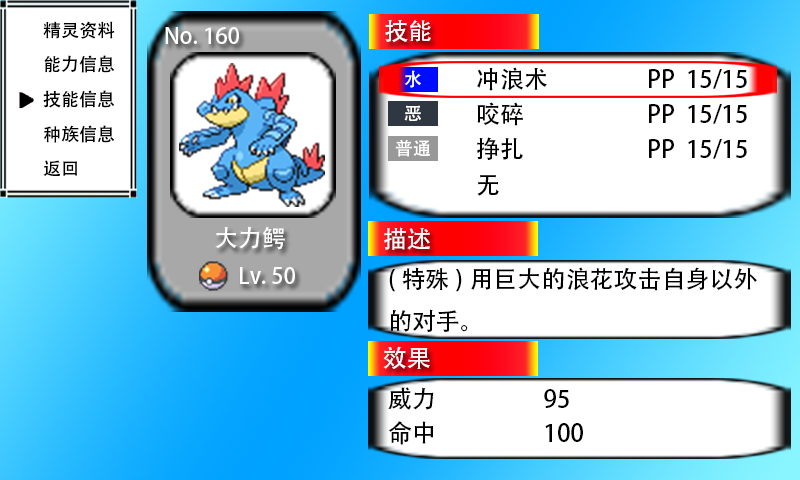
<style>
.page{position:relative;width:800px;height:480px;background:#ffffff}
.page>*{position:absolute;margin:0}
.t1{font:18px "AdobeHeitiStd-Regular";color:#000000}
.t2{font:22px "AdobeHeitiStd-Regular";color:#fffefe}
.t3{font:24px "AdobeHeitiStd-Regular";color:#fffefe}
.t4{font:24px "AdobeHeitiStd-Regular";color:#000000}
</style>
<div class="page">
<p class="t1" style="left:43px;top:21px;width:72px;height:18px">精灵资料</p>
<p class="t2" style="left:165px;top:27px;width:74px;height:17px">No. 160</p>
<p class="t3" style="left:385px;top:20px;width:46px;height:23px">技能</p>
<p class="t1" style="left:44px;top:55px;width:71px;height:18px">能力信息</p>
<p class="t4" style="left:477px;top:67px;width:70px;height:24px">冲浪术</p>
<p class="t4" style="left:649px;top:69px;width:98px;height:20px">PP  15/15</p>
<p class="t1" style="left:43px;top:90px;width:72px;height:18px">技能信息</p>
<p class="t4" style="left:477px;top:102px;width:46px;height:24px">咬碎</p>
<p class="t4" style="left:649px;top:104px;width:98px;height:20px">PP  15/15</p>
<p class="t1" style="left:44px;top:125px;width:71px;height:18px">种族信息</p>
<p class="t4" style="left:477px;top:137px;width:46px;height:23px">挣扎</p>
<p class="t4" style="left:649px;top:139px;width:98px;height:20px">PP  15/15</p>
<p class="t1" style="left:43px;top:160px;width:34px;height:17px">返回</p>
<p class="t4" style="left:477px;top:175px;width:22px;height:21px">无</p>
<p class="t3" style="left:215px;top:226px;width:70px;height:24px">大力鳄</p>
<p class="t3" style="left:384px;top:227px;width:46px;height:23px">描述</p>
<p class="t2" style="left:240px;top:267px;width:55px;height:17px">Lv. 50</p>
<p class="t4" style="left:389px;top:267px;width:368px;height:65px">(特殊)用巨大的浪花攻击自身以外<br>的对手。</p>
<p class="t3" style="left:383px;top:346px;width:47px;height:23px">效果</p>
<p class="t4" style="left:388px;top:387px;width:181px;height:23px">威力                    95</p>
<p class="t4" style="left:388px;top:421px;width:195px;height:24px">命中                    100</p>
</div>
